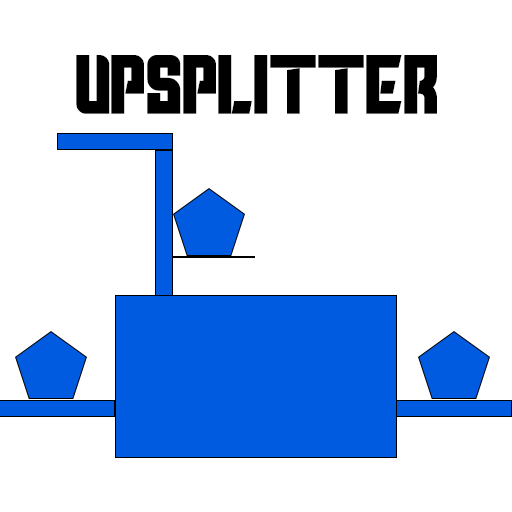
<style>
.page{position:relative;width:512px;height:512px;background:#ffffff}
.page>*{position:absolute;margin:0}
.t1{font:58.8px "Satisfontory";color:#000000}
</style>
<div class="page">
<p class="t1" style="left:76px;top:55px;width:361px;height:59px">upsplitter</p>
</div>
